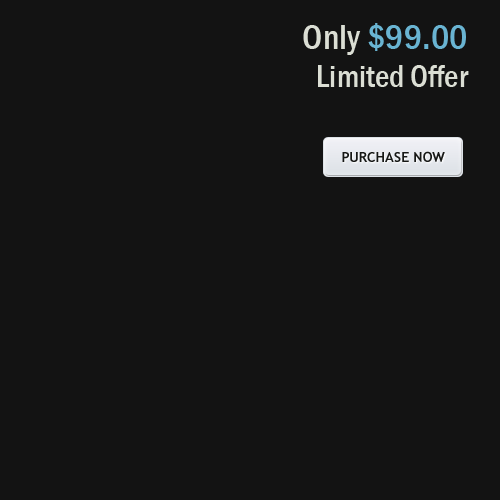
<style>
.page{position:relative;width:500px;height:500px;background:#131313}
.page>*{position:absolute;margin:0}
.t1{font:32px "FranklinGothic-MediumCond";color:#dbded4}
.t2{font:36px "FranklinGothic-MediumCond";color:#dbded4}
.t3{font:36px "FranklinGothic-MediumCond";color:#69b4d2}
.t4{font:14px "TrebuchetMS-Bold";color:#171816;text-transform:uppercase}
</style>
<div class="page">
<p class="t1" style="left:303px;top:23px;width:166px;height:64px;text-align:right"><span class="t2">Only </span><span class="t3">$99.00<br></span>Limited Offer</p>
<p class="t4" style="left:342px;top:151px;width:103px;height:11px">PURCHASE NOW</p>
</div>
